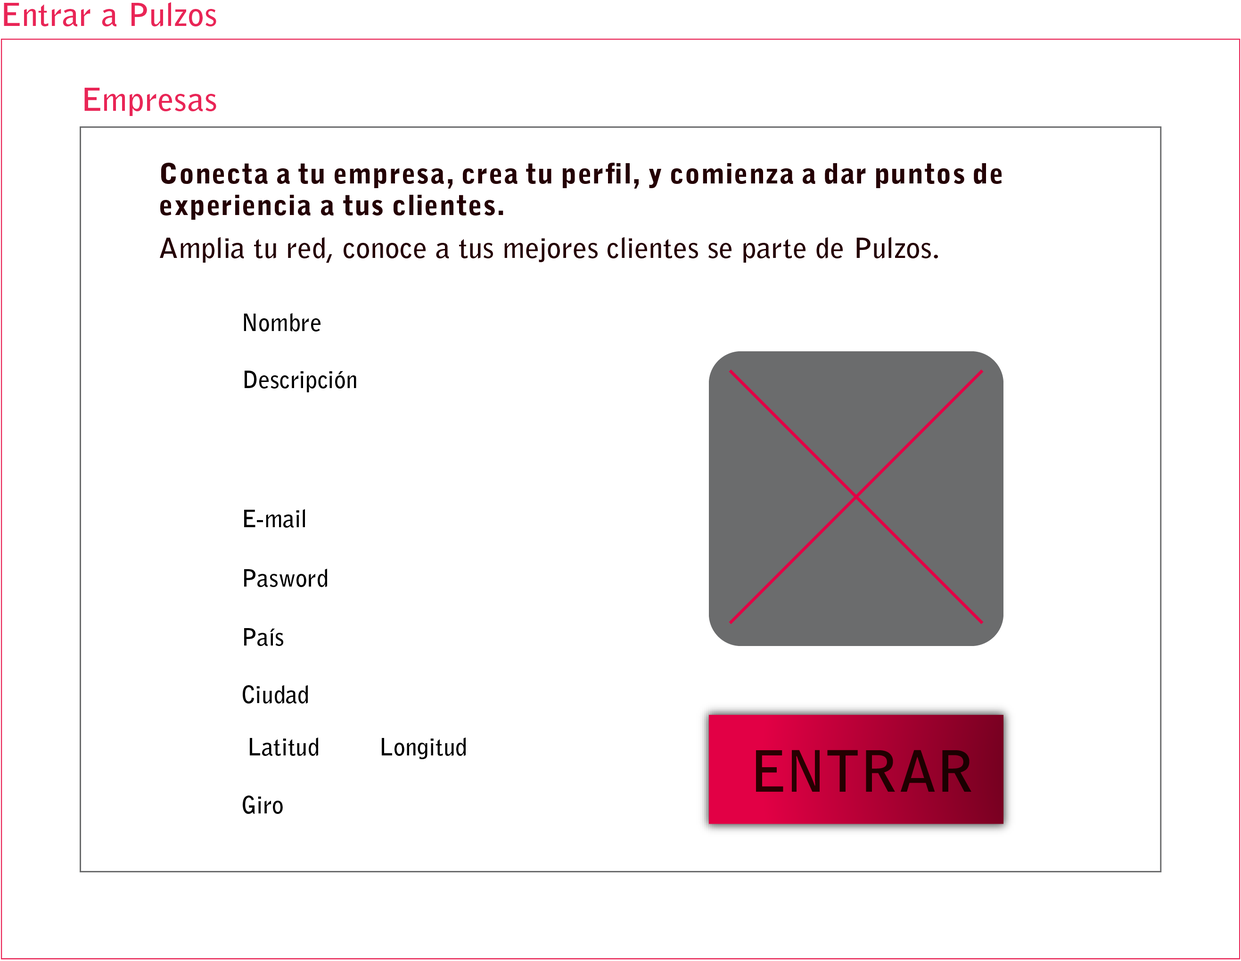
<style>
.page{position:relative;width:1241px;height:961px;background:#ffffff}
.page>*{position:absolute;margin:0}
.t1{font:31.4px "BellGothicStd-Bold";letter-spacing:0.01em;color:#e92556;scale:1.05 1}
.t2{font:27.5px/31.4px "BellGothicStd-Black";letter-spacing:0.01em;color:#240004;scale:1.05 1}
.t3{font:27.5px/43.2px "BellGothicStd-Bold";letter-spacing:0.01em;color:#240004;scale:1.05 1}
.t4{font:23.6px "BellGothicStd-Bold";letter-spacing:0.01em;color:#000000}
</style>
<div class="page">
<p class="t1" style="left:4px;top:2px;width:212px;height:24px">Entrar a Pulzos</p>
<p class="t1" style="left:84px;top:88px;width:132px;height:28px">Empresas</p>
<p class="t2" style="left:160px;top:163px;width:842px;height:100px;text-align:justify">Conecta a tu empresa, crea tu perfil, y comienza a dar puntos de experiencia a tus clientes.<br><span class="t3">Amplia tu red, conoce a tus mejores clientes se parte de Pulzos.</span></p>
<p class="t4" style="left:244px;top:313px;width:77px;height:18px">Nombre</p>
<p class="t4" style="left:245px;top:371px;width:111px;height:21px">Descripción</p>
<p class="t4" style="left:244px;top:509px;width:61px;height:18px">E-mail</p>
<p class="t4" style="left:244px;top:569px;width:83px;height:18px">Pasword</p>
<p class="t4" style="left:244px;top:628px;width:39px;height:18px">País</p>
<p class="t4" style="left:243px;top:685px;width:65px;height:18px">Ciudad</p>
<p class="t4" style="left:250px;top:737px;width:68px;height:19px">Latitud</p>
<p class="t4" style="left:382px;top:737px;width:84px;height:22px">Longitud</p>
<p class="t4" style="left:243px;top:795px;width:40px;height:19px">Giro</p>
</div>
